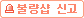
<style>
.page{position:relative;width:84px;height:18px}
.page>*{position:absolute;margin:0}
.t1{font:12px "morris9";letter-spacing:-0.03em;color:#fc866c;font-weight:bold}
</style>
<div class="page">
<p class="t1" style="left:17px;top:4px;width:60px;height:10px">불량샵 신고</p>
</div>
